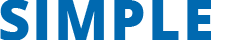
<style>
.page{position:relative;width:228px;height:40px;background:#0069b0}
.page>*{position:absolute;margin:0}
.t1{font:56px "OpenSans-Extrabold";letter-spacing:0.04em;color:#0069b0;text-transform:uppercase}
</style>
<div class="page">
<p class="t1" style="left:0px;top:0px;width:211px;height:41px">simple</p>
</div>
